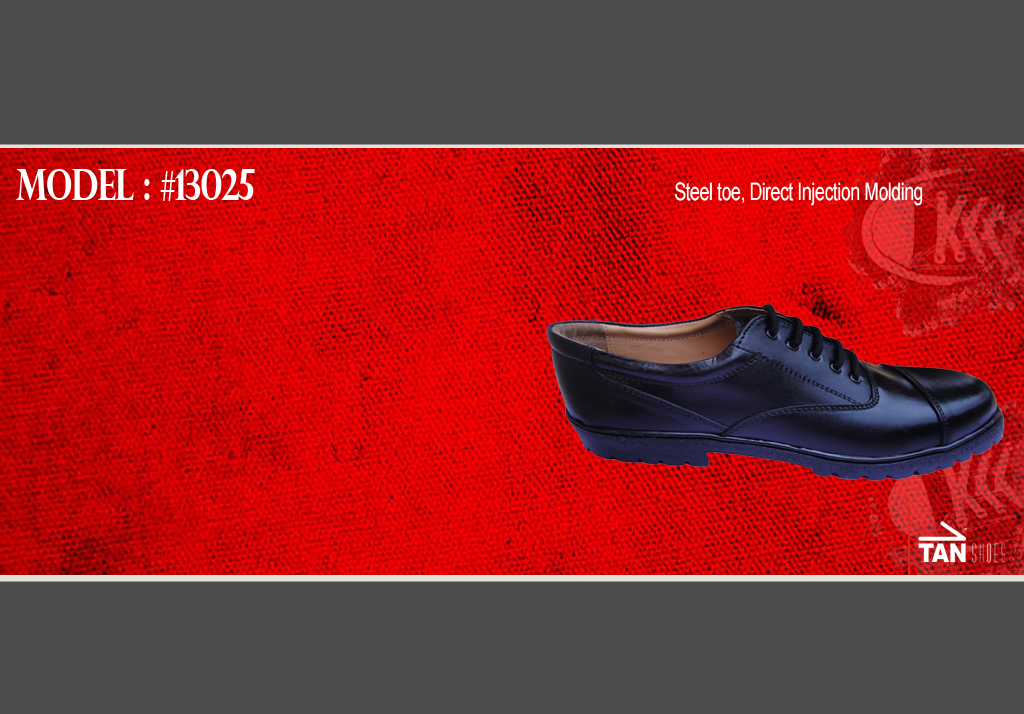
<style>
.page{position:relative;width:1024px;height:714px;background:#4d4d4d}
.page>*{position:absolute;margin:0}
.t1{font:43px "PerpetuaTitlingMT-Bold";letter-spacing:-0.025em;color:#ffffff;scale:0.73 1}
.t2{font:24px "Small Fonts";letter-spacing:-0.025em;color:#ffffff;scale:0.73 1}
</style>
<div class="page">
<p class="t1" style="left:16px;top:169px;width:239px;height:32px">MODEL : #13025</p>
<p class="t2" style="left:674px;top:182px;width:249px;height:24px">Steel toe, Direct Injection Molding</p>
</div>
